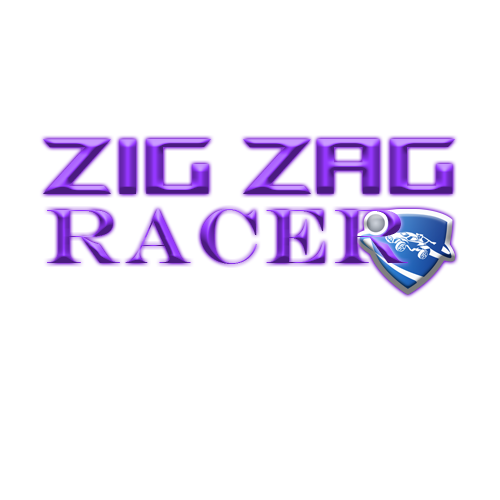
<style>
.page{position:relative;width:500px;height:500px;background:#ffffff}
.page>*{position:absolute;margin:0}
.t1{font:78.3px "ROGFonts-Regular";letter-spacing:0.03em}
.t2{font:78.3px "EngraversMT";letter-spacing:0.03em}
</style>
<div class="page">
<p class="t1" style="left:43px;top:139px;width:412px;height:55px">Zig zag</p>
<p class="t2" style="left:47px;top:209px;width:361px;height:55px">racer</p>
</div>
